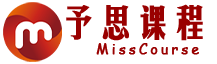
<style>
.page{position:relative;width:217px;height:64px;background:#ffffff}
.page>*{position:absolute;margin:0}
.t1{font:36px "HGMH_CNKI";color:#990000;font-weight:bold}
.t2{font:14px "ComicSansMS";letter-spacing:0.2em;color:#990000;font-weight:bold}
</style>
<div class="page">
<p class="t1" style="left:66px;top:4px;width:137px;height:37px">予思课程</p>
<p class="t2" style="left:96px;top:43px;width:103px;height:12px">MissCourse</p>
</div>
